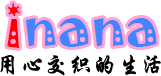
<style>
.page{position:relative;width:161px;height:76px;background:#ffffff}
.page>*{position:absolute;margin:0}
.t1{font:58.3px "Jokerman-Regular";color:#4285ff}
.t2{font:58.3px "Jokerman-Regular";color:#ff0000}
.t3{font:24.2px "STXingkai";color:#000000}
</style>
<div class="page">
<p class="t1" style="left:7px;top:3px;width:150px;height:45px"><span class="t2">i</span>nana</p>
<p class="t3" style="left:0px;top:54px;width:161px;height:22px">用心交织的生活</p>
</div>
